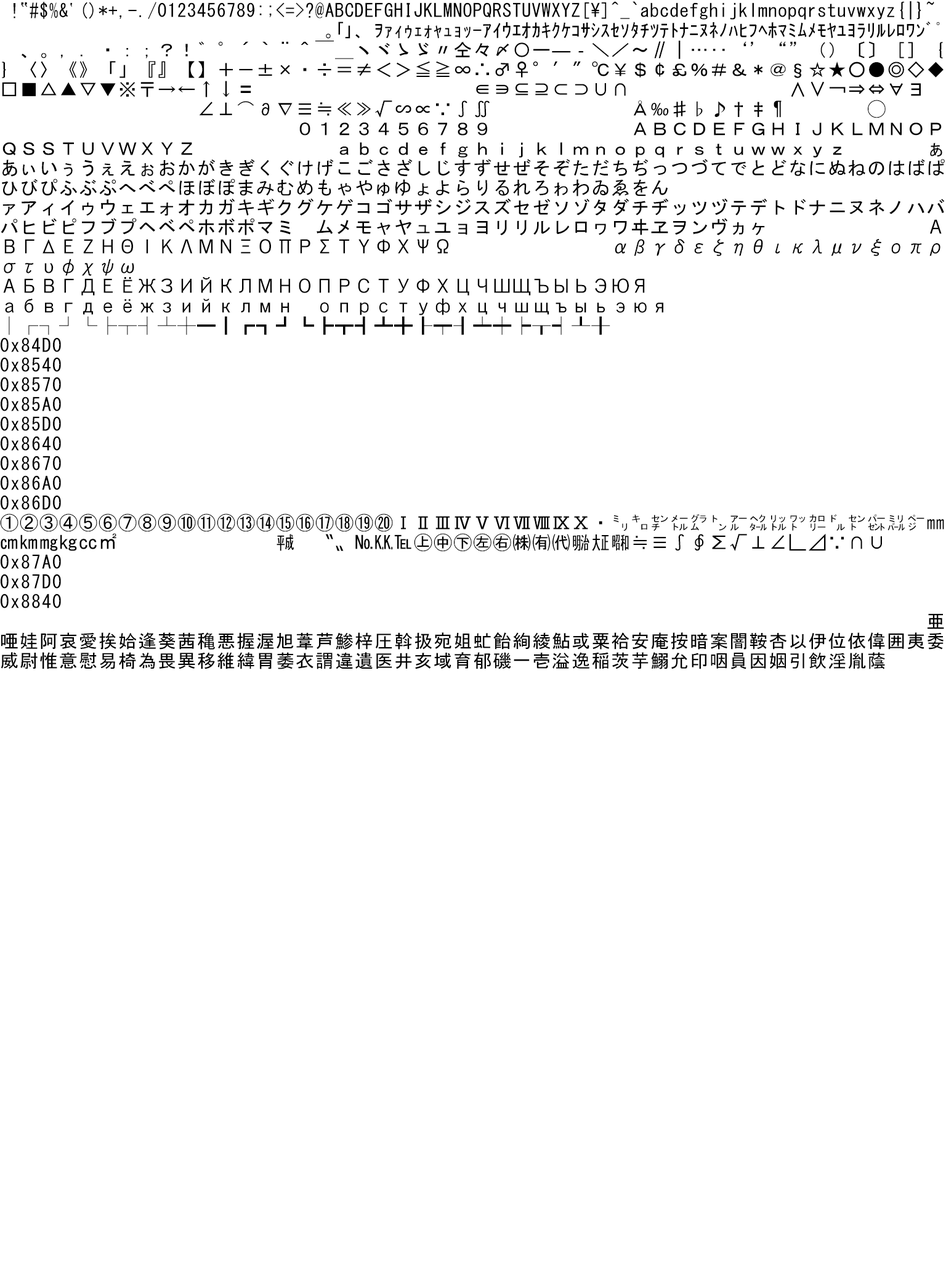
<style>
.page{position:relative;width:946px;height:1261px;background:#ffffff}
.page>*{position:absolute;margin:0}
.t1{font:18.5px/19.7px "MS-Gothic";letter-spacing:0.067em;color:#000000}
.t2{font:18.5px/19.7px "MS-Gothic";letter-spacing:0.033em;color:#000000}
</style>
<div class="page">
<p class="t1" style="left:0px;top:1px;width:944px;height:668px"><span class="t2"> !‟#$%&amp;‛()*+,-./0123456789:;&lt;=&gt;?@ABCDEFGHIJKLMNOPQRSTUVWXYZ[\]^_`abcdefghijklmnopqrstuvwxyz{|}~ <br>                                 ｡｢｣､ ｦｧｨｩｪｫｬｭｮｯ-ｱｲｳｴｵｶｷｸｹｺｻｼｽｾｿﾀﾁﾂﾃﾄﾅﾆﾇﾈﾉﾊﾋﾌﾍﾎﾏﾐﾑﾒﾓﾔﾕﾖﾗﾘﾙﾚﾛﾜﾝﾞﾟ<br></span>　、。，．・：；？！゛゜´｀¨＾￣＿ヽヾゝゞ〃仝々〆〇ー―‐＼／～∥｜…‥‘’“”（）〔〕［］｛<br>｝〈〉《》「」『』【】＋－±×・÷＝≠＜＞≦≧∞∴♂♀°′″℃￥＄￠￡％＃＆＊＠§☆★○●◎◇◆<br>□■△▲▽▼※〒→←↑↓〓　　　　　　　　　　　∈∋⊆⊇⊂⊃∪∩　　　　　　　　∧∨￢⇒⇔∀∃　<br>　　　　　　　　　　∠⊥⌒∂∇≡≒≪≫√∽∝∵∫∬　　　　　　　Å‰♯♭♪†‡¶　　　　◯　　　<br>　　　　　　　　　　　　　　　０１２３４５６７８９　　　　　　　ＡＢＣＤＥＦＧＨＩＪＫＬＭＮＯＰ<br>ＱＳＳＴＵＶＷＸＹＺ　　　　　　　ａｂｃｄｅｆｇｈｉｊｋｌｍｎｏｐｑｒｓｔｕｗｗｘｙｚ　　　　ぁ<br>あぃいぅうぇえぉおかがきぎくぐけげこごさざしじすずせぜそぞただちぢっつづてでとどなにぬねのはばぱ<br>ひびぴふぶぷへべぺほぼぽまみむめもゃやゅゆょよらりるれろゎわゐゑをん<br>ァアィイゥウェエォオカガキギクグケゲコゴサザシジスズセゼソゾタダチヂッツヅテデトドナニヌネノハバ<br>パヒビピフブプヘベペホボポマミ　ムメモャヤュユョヨリリルレロヮワヰヱヲンヴヵヶ　　　　　　　　Α<br>ΒΓΔΕΖΗΘΙΚΛΜΝΞΟΠΡΣΤΥΦΧΨΩ　　　　　　　　αβγδεζηθικλμνξοπρ<br>στυφχψω<br>АБВГДЕЁЖЗИЙКЛМНОПРСТУФХЦЧШЩЪЫЬЭЮЯ<br>абвгдеёжзийклмн　опрстуфхцчшщъыьэюя<br>│┌┐┘└├┬┤┴┼━┃┏┓┛┗┣┳┫┻╋┠┯┨┷┿┝┰┥┸╂<br>0x84D0<br>0x8540<br>0x8570<br>0x85A0<br>0x85D0<br>0x8640<br>0x8670<br>0x86A0<br>0x86D0<br>①②③④⑤⑥⑦⑧⑨⑩⑪⑫⑬⑭⑮⑯⑰⑱⑲⑳ⅠⅡⅢⅣⅤⅥⅦⅧⅨⅩ・㍉㌔㌢㍍㌘㌧㌃㌶㍑㍗㌍㌦㌣㌫㍊㌻㎜<br>㎝㎞㎎㎏㏄㎡　　　　　　　　㍻　〝〟№㏍℡㊤㊥㊦㊧㊨㈱㈲㈹㍾㍽㍼≒≡∫∮∑√⊥∠∟⊿∵∩∪<br>0x87A0<br>0x87D0<br>0x8840<br>　　　　　　　　　　　　　　　　　　　　　　　　　　　　　　　　　　　　　　　　　　　　　　　亜<br>唖娃阿哀愛挨姶逢葵茜穐悪握渥旭葦芦鯵梓圧斡扱宛姐虻飴絢綾鮎或粟袷安庵按暗案闇鞍杏以伊位依偉囲夷委<br>威尉惟意慰易椅為畏異移維緯胃萎衣謂違遺医井亥域育郁磯一壱溢逸稲茨芋鰯允印咽員因姻引飲淫胤蔭</p>
</div>
